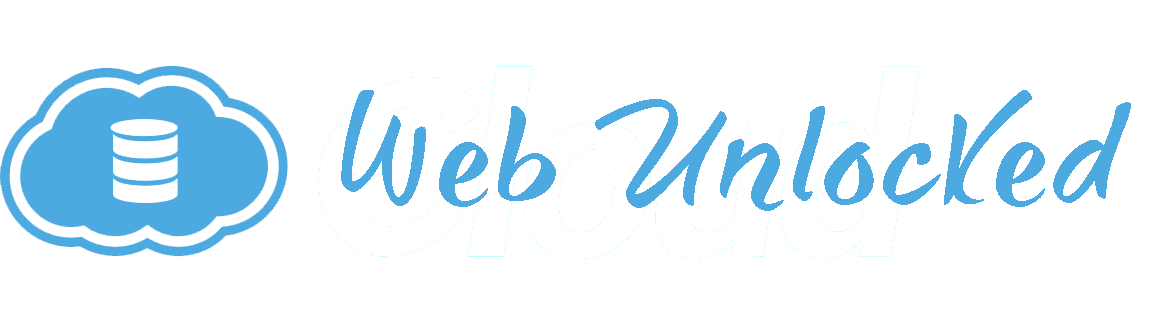
<style>
.page{position:relative;width:1169px;height:332px;background:#ffffff}
.page>*{position:absolute;margin:0}
.t1{font:109.3px "SheAlwaysWalkAloneDemo";letter-spacing:0.05em;color:#4daae0}
</style>
<div class="page">
<p class="t1" style="left:341px;top:90px;width:790px;height:121px">Web Unlocked</p>
</div>
